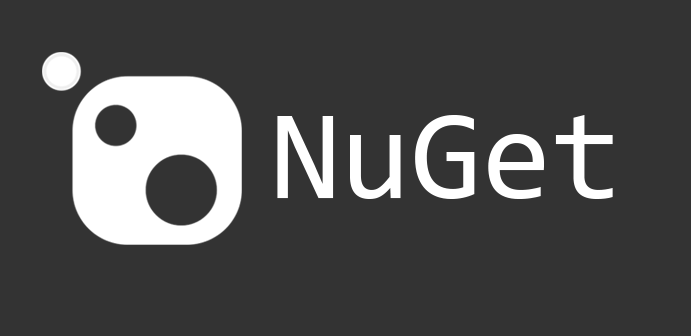
<style>
.page{position:relative;width:691px;height:336px;background:#333333}
.page>*{position:absolute;margin:0}
.t1{font:128px "Consolas";color:#ffffff}
</style>
<div class="page">
<p class="t1" style="left:277px;top:115px;width:336px;height:84px">NuGet</p>
</div>
